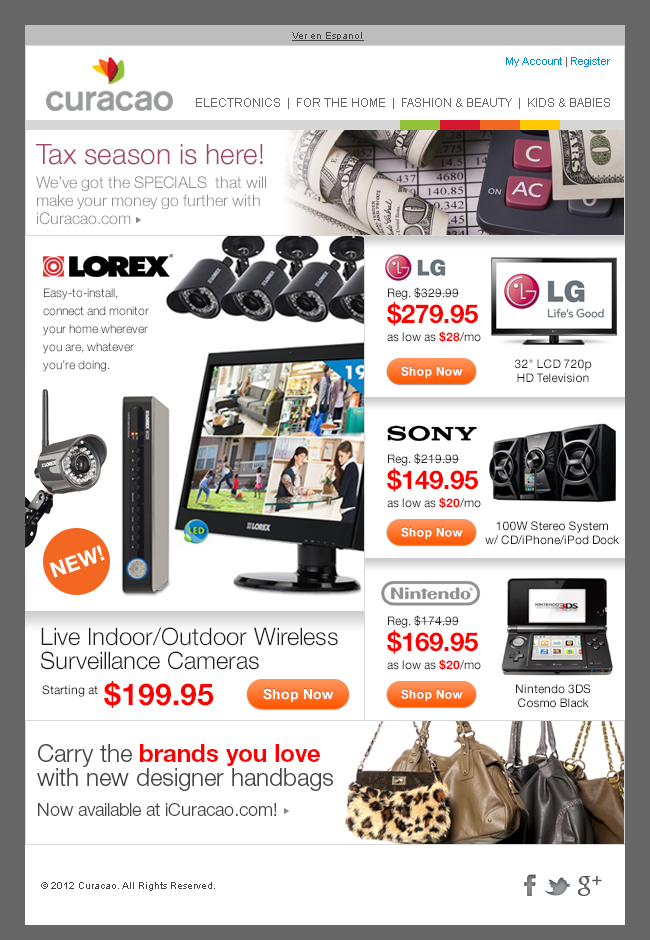
<style>
.page{position:relative;width:650px;height:940px;background:#ffffff}
.page>*{position:absolute;margin:0}
.t1{font:10px "ArialMT";color:#444444;text-decoration:underline}
.t2{font:11px "ArialMT";color:#008ecf}
.t3{font:11px "ArialMT";color:#666666}
.t4{font:12px "ArialMT";color:#666666}
.t5{font:16px/18px "HelveticaNeue-Light";color:#878a8e}
.t6{font:28px/24px "HelveticaNeue-Light";color:#a24661}
.t7{font:16px/24px "HelveticaNeue-Light";color:#878a8e}
.t8{font:12px/18px "HelveticaNeue-Light";color:#1e1e1e}
.t9{font:12px/18px "HelveticaNeue-Roman";color:#1e1e1e}
.t10{font:26px/26px "HelveticaNeue-Bold";color:#ff0000}
.t11{font:12px/18px "HelveticaNeue-Bold";color:#ff0000}
.t12{font:12px/14px "HelveticaNeue-Roman";color:#1e1e1e}
.t13{font:21px "HelveticaNeue-Bold";color:#ffffff}
.t14{font:24px/24px "HelveticaNeue-Light";color:#1e1e1e}
.t15{font:30px/36px "HelveticaNeue-Bold";color:#ff0000}
.t16{font:12px "HelveticaNeue-Roman";color:#1e1e1e}
.t17{font:18px/30px "HelveticaNeue-Light";color:#444444}
.t18{font:24px/30px "HelveticaNeue-Light";color:#444444}
.t19{font:24px/30px "HelveticaNeue-Bold";color:#ff0000}
.t20{font:24px/24px "HelveticaNeue-Light";color:#444444}
.t21{font:10px "ArialMT";color:#444444}
</style>
<div class="page">
<p class="t1" style="left:292px;top:32px;width:72px;height:9px">Ver en Espanol</p>
<p class="t2" style="left:506px;top:57px;width:104px;height:10px">My Account<span class="t3"> | </span>Register</p>
<p class="t4" style="left:196px;top:98px;width:414px;height:11px">ELECTRONICS  |  FOR THE HOME  |  FASHION &amp; BEAUTY  |  KIDS &amp; BABIES</p>
<p class="t5" style="left:36px;top:144px;width:230px;height:81px"><span class="t6">Tax season is here!<br></span><span class="t7">We’ve got the SPECIALS  that will </span>make your money go further with iCuracao.com</p>
<p class="t8" style="left:43px;top:288px;width:106px;height:84px">Easy-to-install, <br>connect and monitor <br>your home wherever you are, whatever <br>you’re doing.</p>
<p class="t9" style="left:387px;top:287px;width:94px;height:56px">Reg. $329.99<br><span class="t10">$279.95<br></span>as low as <span class="t11">$28</span>/mo</p>
<p class="t12" style="left:514px;top:359px;width:78px;height:24px;text-align:center">32" LCD 720p<br>HD Television</p>
<p class="t9" style="left:387px;top:453px;width:94px;height:56px">Reg. $219.99<br><span class="t10">$149.95<br></span>as low as <span class="t11">$20</span>/mo</p>
<p class="t12" style="left:485px;top:521px;width:134px;height:24px;text-align:center">100W Stereo System<br>w/ CD/iPhone/iPod Dock</p>
<p class="t13" style="left:49px;top:545px;width:56px;height:33px;rotate:-19deg">NEW!</p>
<p class="t9" style="left:387px;top:615px;width:94px;height:56px">Reg. $174.99<br><span class="t10">$169.95<br></span>as low as <span class="t11">$20</span>/mo</p>
<p class="t14" style="left:41px;top:627px;width:297px;height:81px">Live Indoor/Outdoor Wireless Surveillance Cameras<br><span class="t15">        $199.95</span></p>
<p class="t16" style="left:42px;top:685px;width:56px;height:12px">Starting at</p>
<p class="t12" style="left:516px;top:684px;width:75px;height:24px;text-align:center">Nintendo 3DS<br>Cosmo Black</p>
<p class="t17" style="left:37px;top:744px;width:296px;height:72px"><span class="t18">Carry the </span><span class="t19">brands you love<br></span><span class="t20">with new designer handbags <br></span>Now available at iCuracao.com!</p>
<p class="t21" style="left:41px;top:882px;width:174px;height:9px">© 2012 Curacao. All Rights Reserved.</p>
</div>
